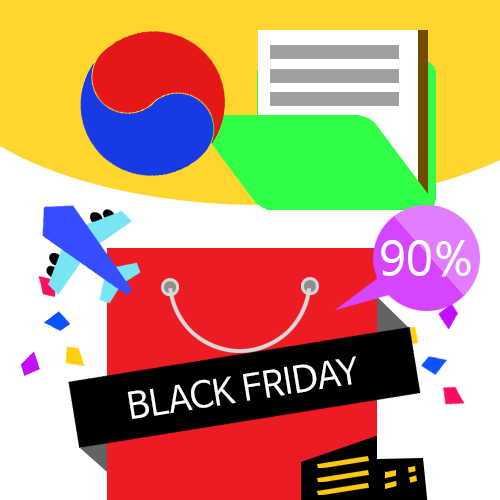
<style>
.page{position:relative;width:500px;height:500px;background:#ffffff}
.page>*{position:absolute;margin:0}
.t1{font:45.9px "NanumBarunGothic";color:#ffffff}
.t2{font:35.5px "NanumBarunGothic";color:#ffffff}
</style>
<div class="page">
<p class="t1" style="left:381px;top:240px;width:90px;height:37px">90%</p>
<p class="t2" style="left:127px;top:356px;width:229px;height:63px;rotate:-9deg">BLACK FRIDAY</p>
</div>
